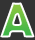
<style>
.page{position:relative;width:35px;height:40px;background:#333333}
.page>*{position:absolute;margin:0}
.t1{font:50px "BerlinSansFBDemi-Bold";letter-spacing:0.2em}
</style>
<div class="page">
<p class="t1" style="left:0px;top:2px;width:35px;height:36px">A</p>
</div>
